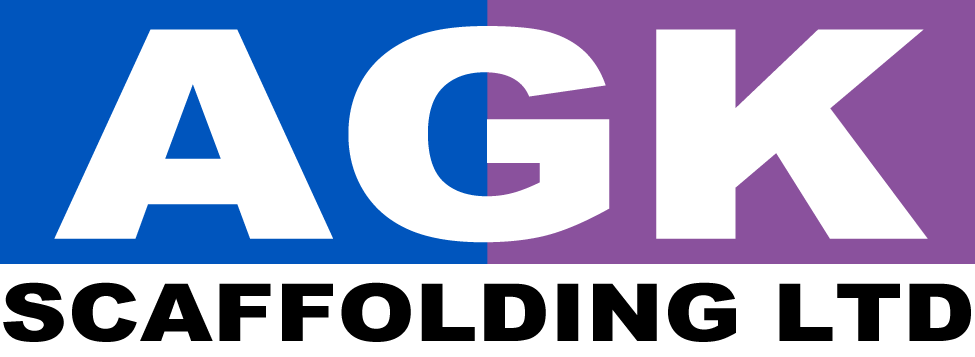
<style>
.page{position:relative;width:975px;height:357px;background:#ffffff}
.page>*{position:absolute;margin:0}
.t1{font:292.1px "Arial-Black";color:#ffffff;scale:1.22 1}
.t2{font:80px "Arial-Black";color:#000000;scale:1.17 1}
</style>
<div class="page">
<p class="t1" style="left:54px;top:26px;width:874px;height:217px">AGK</p>
<p class="t2" style="left:3px;top:282px;width:968px;height:60px">SCAFFOLDING LTD</p>
</div>
